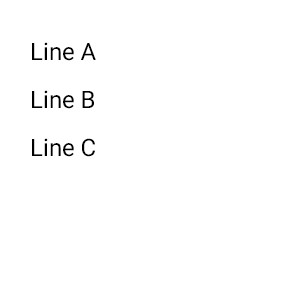
<style>
.page{position:relative;width:300px;height:300px;background:#ffffff}
.page>*{position:absolute;margin:0}
.t1{font:24px/48px "Roboto-Regular";color:#000000}
</style>
<div class="page">
<p class="t1" style="left:32px;top:42px;width:64px;height:115px">Line A<br>Line B<br>Line C</p>
</div>
